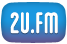
<style>
.page{position:relative;width:67px;height:44px;background:#ffffff}
.page>*{position:absolute;margin:0}
.t1{font:30px "Blanch-Condensed";color:#ffffff;text-transform:uppercase;font-weight:bold}
</style>
<div class="page">
<p class="t1" style="left:10px;top:12px;width:48px;height:22px">2u.fm</p>
</div>
